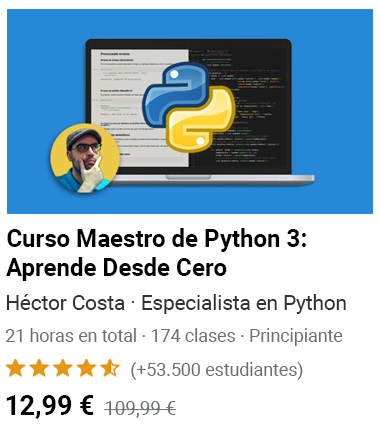
<style>
.page{position:relative;width:380px;height:425px;background:#ffffff}
.page>*{position:absolute;margin:0}
.t1{font:24.7px/28.8px "Roboto-Bold";color:#000000}
.t2{font:20.9px "Roboto-Regular";color:#303335}
.t3{font:18.3px "Roboto-Regular";color:#6a6f73;scale:0.97 1}
.t4{font:18.2px "Roboto-Regular";color:#6a6f73}
.t5{font:27.7px "Roboto-Bold";color:#000000;scale:0.97 1}
.t6{font:19.4px "Roboto-Regular";color:#6a6f73}
</style>
<div class="page">
<p class="t1" style="left:6px;top:228px;width:300px;height:53px">Curso Maestro de Python 3: Aprende Desde Cero</p>
<p class="t2" style="left:6px;top:294px;width:340px;height:20px">Héctor Costa · Especialista en Python</p>
<p class="t3" style="left:6px;top:328px;width:337px;height:18px">21 horas en total · 174 clases · Principiante</p>
<p class="t4" style="left:131px;top:362px;width:172px;height:18px">(+53.500 estudiantes)</p>
<p class="t5" style="left:6px;top:395px;width:88px;height:24px">12,99 €</p>
<p class="t6" style="left:104px;top:401px;width:73px;height:17px">109,99 €</p>
</div>
